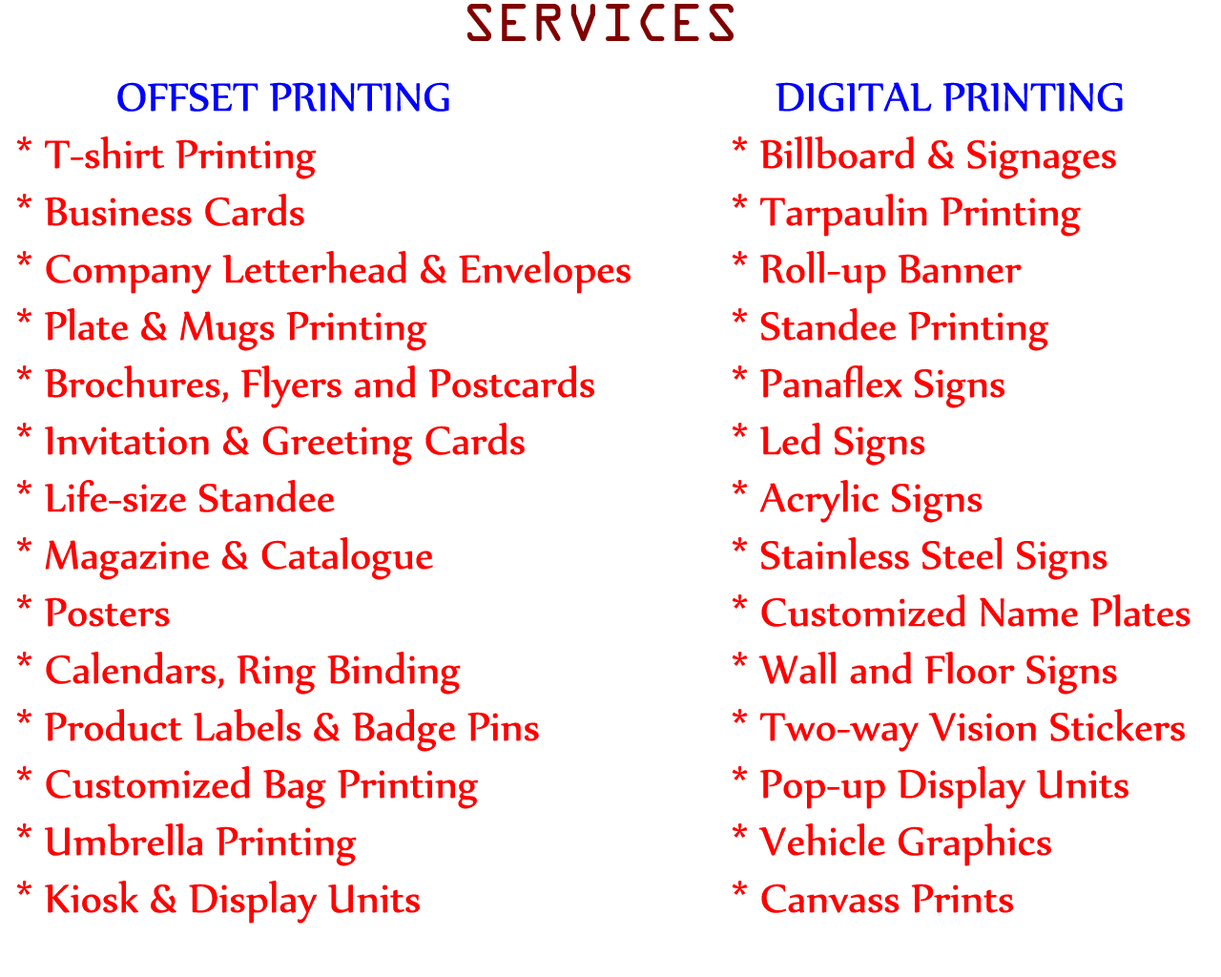
<style>
.page{position:relative;width:1221px;height:977px;background:#ffffff}
.page>*{position:absolute;margin:0}
.t1{font:57.3px "OCRAExtended";color:#800000}
.t2{font:47.7px "Nyala-Regular";color:#ff0000}
.t3{font:47.7px "Nyala-Regular";color:#0000ff}
</style>
<div class="page">
<p class="t1" style="left:467px;top:4px;width:266px;height:37px">SERVICES</p>
<p class="t2" style="left:16px;top:82px;width:614px;height:841px"><span class="t3">         OFFSET PRINTING</span><br>* T-shirt Printing<br>* Business Cards<br>* Company Letterhead &amp; Envelopes<br>* Plate &amp; Mugs Printing<br>* Brochures, Flyers and Postcards<br>* Invitation &amp; Greeting Cards<br>* Life-size Standee<br>* Magazine &amp; Catalogue<br>* Posters<br>* Calendars, Ring Binding<br>* Product Labels &amp; Badge Pins<br>* Customized Bag Printing<br>* Umbrella Printing<br>* Kiosk &amp; Display Units</p>
<p class="t2" style="left:732px;top:82px;width:458px;height:831px"><span class="t3">    DIGITAL PRINTING<br></span>* Billboard &amp; Signages<br>* Tarpaulin Printing<br>* Roll-up Banner<br>* Standee Printing<br>* Panaflex Signs<br>* Led Signs<br>* Acrylic Signs<br>* Stainless Steel Signs<br>* Customized Name Plates<br>* Wall and Floor Signs<br>* Two-way Vision Stickers<br>* Pop-up Display Units<br>* Vehicle Graphics<br>* Canvass Prints</p>
</div>
